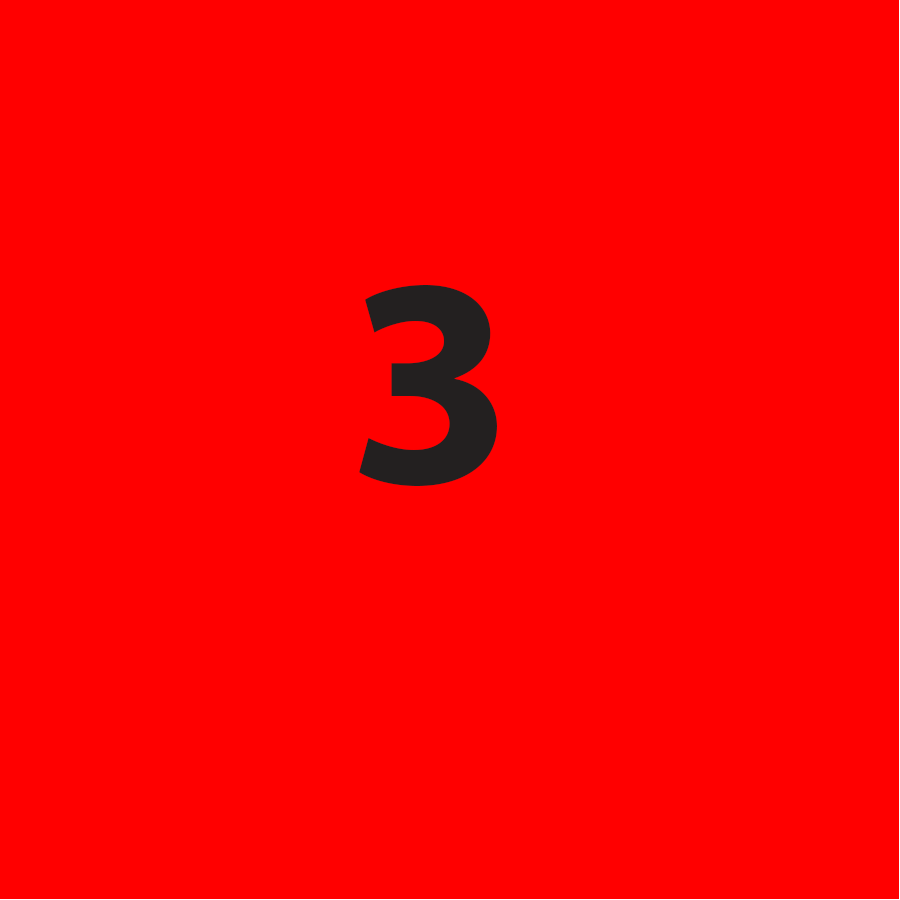
<style>
.page{position:relative;width:900px;height:900px;background:#ff0000}
.page>*{position:absolute;margin:0}
.t1{font:300px "MyriadPro-Bold";color:#232020}
</style>
<div class="page">
<p class="t1" style="left:359px;top:285px;width:138px;height:201px">3</p>
</div>
